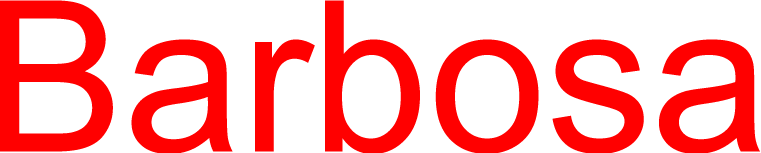
<style>
.page{position:relative;width:761px;height:153px;background:#ffffff}
.page>*{position:absolute;margin:0}
.t1{font:210.6px "ArialMT";color:#ff0000}
</style>
<div class="page">
<p class="t1" style="left:0px;top:0px;width:760px;height:154px">Barbosa</p>
</div>
